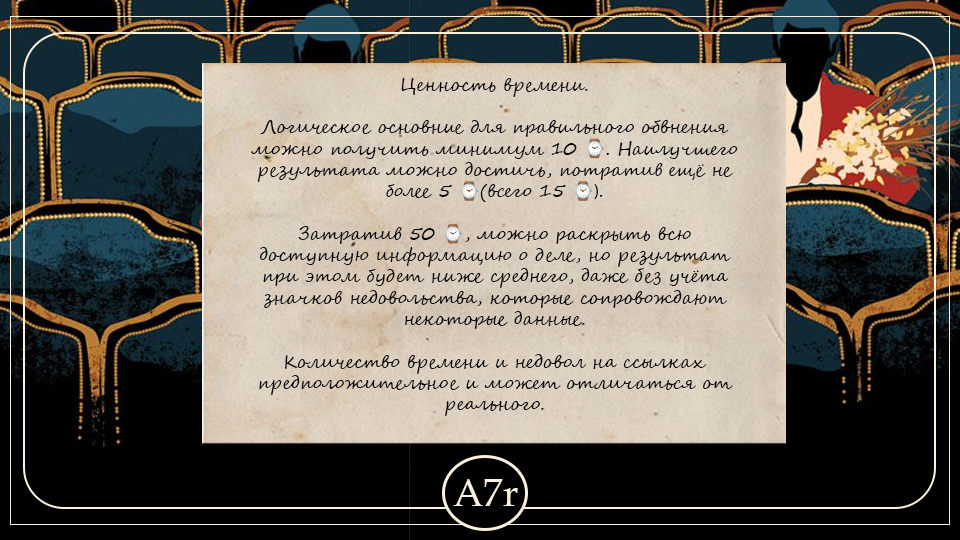
<style>
.page{position:relative;width:960px;height:540px;background:#000000}
.page>*{position:absolute;margin:0}
.t1{font:17.8px "SegoeScript";color:#000000}
.t2{font:17.8px "NotoColorEmoji-SVG";color:#cf0000}
.t3{font:17.8px "MyriadPro-Regular";color:#000000}
.t4{font:38.8px "BookAntiqua";color:#f9f1de}
</style>
<div class="page">
<p class="t1" style="left:251px;top:78px;width:487px;height:338px;text-align:center">Ценность времени.<br><br>Логическое основние для правильного обвнения можно получить минимум 10 <span class="t2">⌚</span>. Наилучшего результата можно достичь, потратив ещё не более 5 <span class="t2">⌚</span>(всего 15 <span class="t2">⌚</span><span class="t3">)</span>.<br><br>Затратив 50 <span class="t2">⌚</span>, можно раскрыть всю доступную информацию о деле, но результат при этом будет ниже среднего, даже без учёта значков недовольства, которые сопровождают некоторые данные.<br><br>Количество времени и недовол на ссылках предположительное и может отличаться от реального.</p>
<p class="t4" style="left:453px;top:479px;width:65px;height:27px">A7r</p>
</div>
